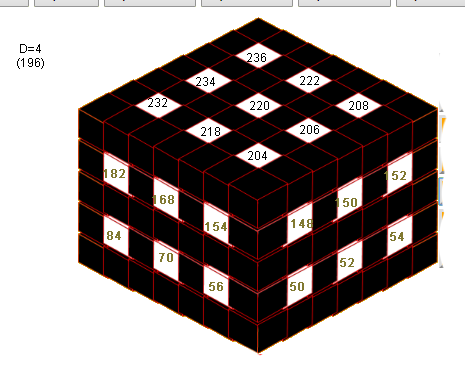
<style>
.page{position:relative;width:465px;height:382px;background:#ffffff}
.page>*{position:absolute;margin:0}
.t1{font:12px "ArialMT";color:#000000}
.t2{font:12px "ArialMT";color:#817931;font-weight:bold}
</style>
<div class="page">
<p class="t1" style="left:17px;top:44px;width:27px;height:25px;text-align:center">D=4<br>(196)</p>
<p class="t1" style="left:247px;top:53px;width:19px;height:9px">236</p>
<p class="t1" style="left:196px;top:77px;width:19px;height:9px">234</p>
<p class="t1" style="left:300px;top:76px;width:19px;height:9px">222</p>
<p class="t1" style="left:148px;top:98px;width:19px;height:9px">232</p>
<p class="t1" style="left:250px;top:101px;width:19px;height:9px">220</p>
<p class="t1" style="left:349px;top:101px;width:19px;height:9px">208</p>
<p class="t1" style="left:300px;top:125px;width:19px;height:9px">206</p>
<p class="t1" style="left:201px;top:127px;width:19px;height:9px">218</p>
<p class="t1" style="left:248px;top:151px;width:19px;height:9px">204</p>
<p class="t2" style="left:103px;top:169px;width:22px;height:9px">182</p>
<p class="t2" style="left:384px;top:171px;width:22px;height:9px">152</p>
<p class="t2" style="left:152px;top:195px;width:22px;height:9px">168</p>
<p class="t2" style="left:335px;top:198px;width:22px;height:9px">150</p>
<p class="t2" style="left:205px;top:222px;width:22px;height:9px">154</p>
<p class="t2" style="left:291px;top:219px;width:22px;height:9px">148</p>
<p class="t2" style="left:107px;top:231px;width:14px;height:9px">84</p>
<p class="t2" style="left:390px;top:232px;width:14px;height:9px">54</p>
<p class="t2" style="left:159px;top:253px;width:14px;height:9px">70</p>
<p class="t2" style="left:340px;top:258px;width:14px;height:9px">52</p>
<p class="t2" style="left:209px;top:282px;width:14px;height:9px">56</p>
<p class="t2" style="left:290px;top:282px;width:14px;height:9px">50</p>
</div>
